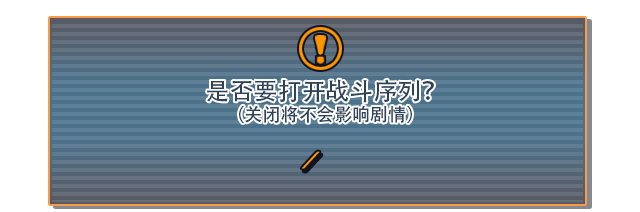
<style>
.page{position:relative;width:640px;height:212px;background:#ffffff}
.page>*{position:absolute;margin:0}
.t1{font:18px/26px "AdobeHeitiStd-Regular";color:#2e4357}
.t2{font:24px/26px "AdobeHeitiStd-Regular";color:#2e4357}
</style>
<div class="page">
<p class="t1" style="left:207px;top:79px;width:227px;height:44px;text-align:center"><span class="t2">是否要打开战斗序列？<br></span>（关闭将不会影响剧情）</p>
</div>
